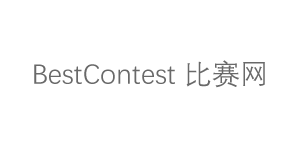
<style>
.page{position:relative;width:300px;height:150px;background:#ffffff}
.page>*{position:absolute;margin:0}
.t1{font:28.3px "DengXian-Regular";color:#696969}
</style>
<div class="page">
<p class="t1" style="left:34px;top:60px;width:231px;height:28px">BestContest 比赛网</p>
</div>
